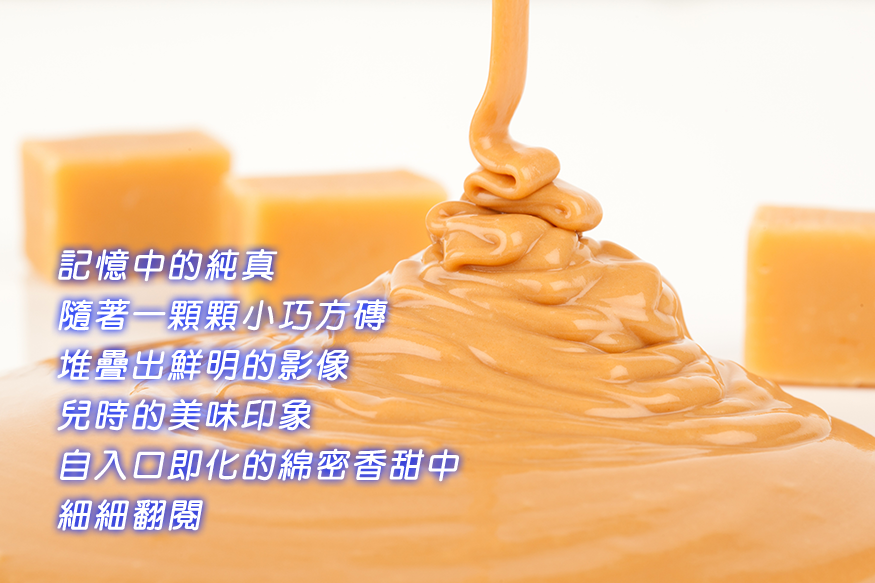
<style>
.page{position:relative;width:875px;height:583px}
.page>*{position:absolute;margin:0}
.t1{font:33.3px/50px "DFYuan-Bd-HKP-BF";letter-spacing:0.075em;color:#ffffff;font-weight:bold;font-style:italic}
</style>
<div class="page">
<p class="t1" style="left:57px;top:249px;width:402px;height:282px">記憶中的純真<br>隨著一顆顆小巧方磚<br>堆疊出鮮明的影像<br>兒時的美味印象<br>自入口即化的綿密香甜中<br>細細翻閱</p>
</div>
